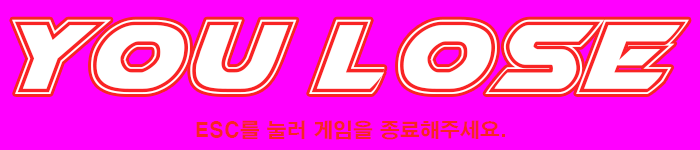
<style>
.page{position:relative;width:700px;height:150px;background:#ff00ff}
.page>*{position:absolute;margin:0}
.t1{font:140px "AirstrikeAcademy";color:#ffffff}
.t2{font:20px "H2gtrE";color:#f92424}
</style>
<div class="page">
<p class="t1" style="left:12px;top:19px;width:677px;height:75px">You lose</p>
<p class="t2" style="left:196px;top:120px;width:309px;height:20px">ESC를 눌러 게임을 종료해주세요.</p>
</div>
